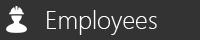
<style>
.page{position:relative;width:200px;height:40px;background:#333333}
.page>*{position:absolute;margin:0}
.t1{font:25px "SegoeUI-Light";color:#ffffff}
</style>
<div class="page">
<p class="t1" style="left:47px;top:10px;width:110px;height:25px">Employees</p>
</div>
